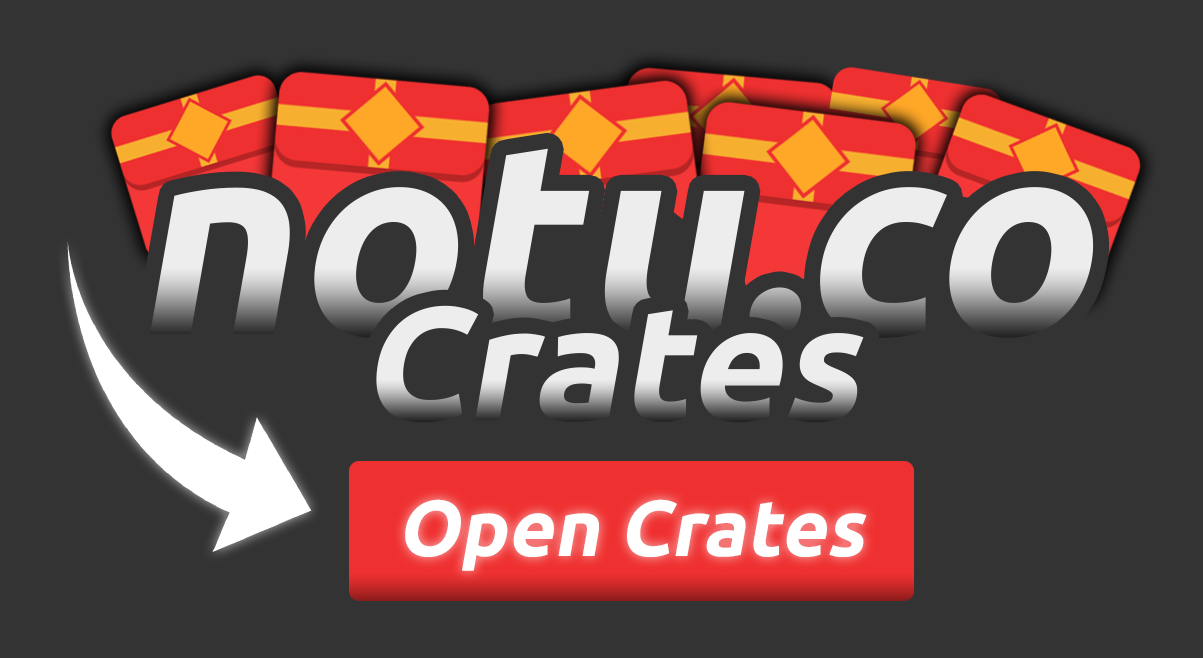
<style>
.page{position:relative;width:1203px;height:658px;background:#333333}
.page>*{position:absolute;margin:0}
.t1{font:160.6px "Ubuntu-Bold";color:#ededed;font-style:italic}
.t2{font:79.3px "Ubuntu-Bold";color:#ededed;font-style:italic}
</style>
<div class="page">
<p class="t1" style="left:376px;top:305px;width:488px;height:118px">Crates</p>
<p class="t2" style="left:405px;top:499px;width:462px;height:72px">Open Crates</p>
</div>
